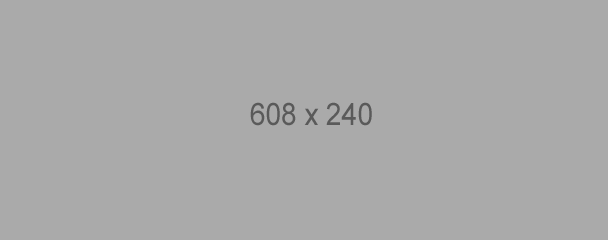
<style>
.page{position:relative;width:608px;height:240px;background:#aaaaaa}
.page>*{position:absolute;margin:0}
.t1{font:31.1px "ArialMT";color:#5a5a5a;scale:0.9 1}
</style>
<div class="page">
<p class="t1" style="left:250px;top:102px;width:122px;height:24px">608 x 240</p>
</div>
